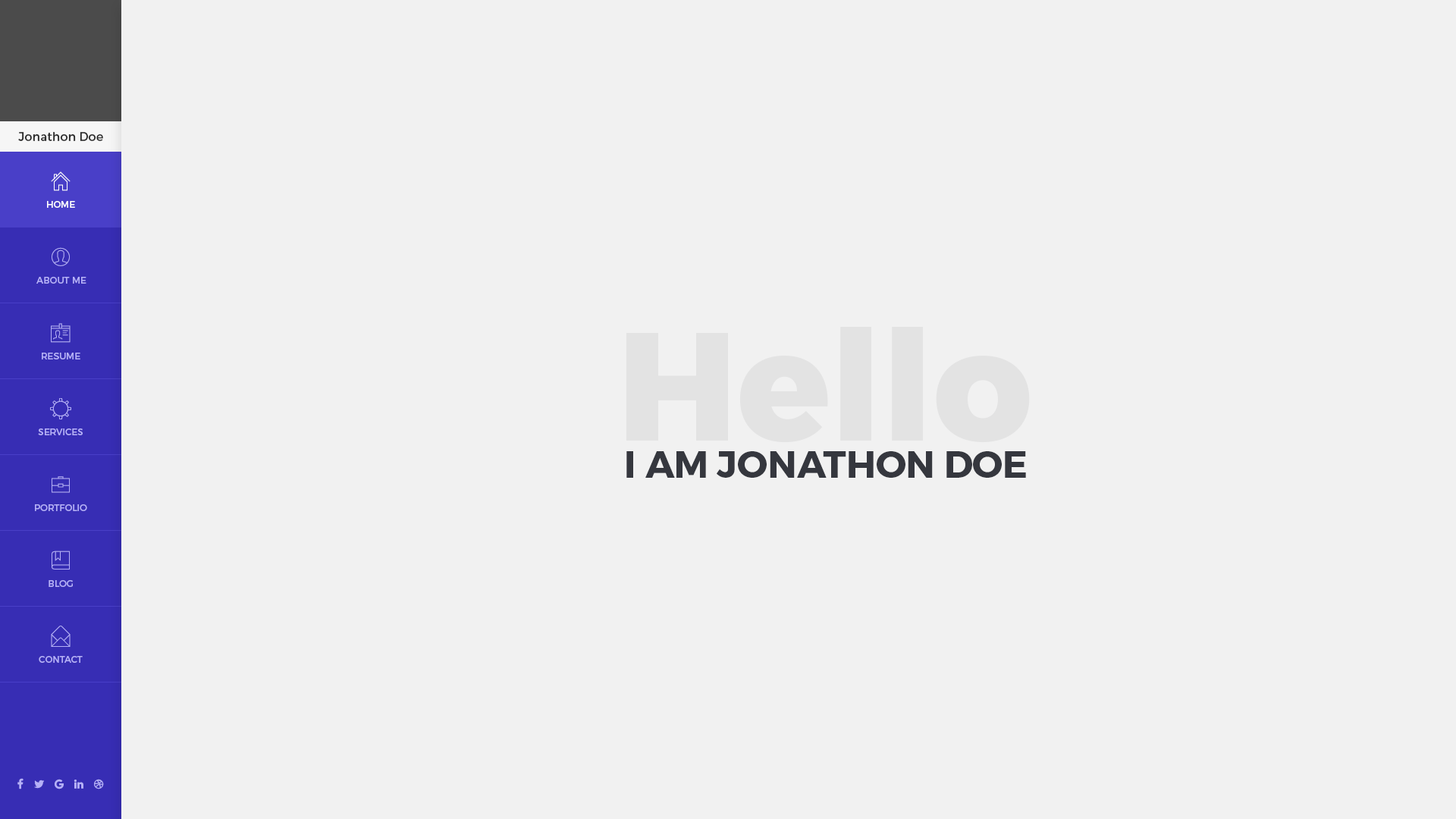
<style>
.page{position:relative;width:1456px;height:819px;background:#f1f1f1}
.page>*{position:absolute;margin:0}
.t1{font:12.1px "Montserrat-Regular";color:#2a2a2a}
.t2{font:9.1px "Montserrat-Regular";color:#ffffff;text-transform:uppercase}
.t3{font:9.1px "Montserrat-Regular";color:#b5b0f7;text-transform:uppercase}
.t4{font:153.3px "Montserrat-ExtraBold";color:#e3e3e3}
.t5{font:37.6px "Montserrat-Bold";color:#35373e}
</style>
<div class="page">
<p class="t1" style="left:18px;top:132px;width:85px;height:9px">Jonathon Doe</p>
<p class="t2" style="left:47px;top:201px;width:28px;height:7px">HOME</p>
<p class="t3" style="left:36px;top:277px;width:50px;height:7px">about me</p>
<p class="t4" style="left:626px;top:327px;width:404px;height:116px">Hello</p>
<p class="t3" style="left:42px;top:353px;width:38px;height:6px">resume</p>
<p class="t3" style="left:38px;top:428px;width:45px;height:7px">services</p>
<p class="t5" style="left:626px;top:451px;width:400px;height:27px">I AM JONATHON DOE</p>
<p class="t3" style="left:35px;top:504px;width:52px;height:7px">portfolio</p>
<p class="t3" style="left:49px;top:580px;width:24px;height:7px">blog</p>
<p class="t3" style="left:39px;top:656px;width:44px;height:7px">contact</p>
</div>
